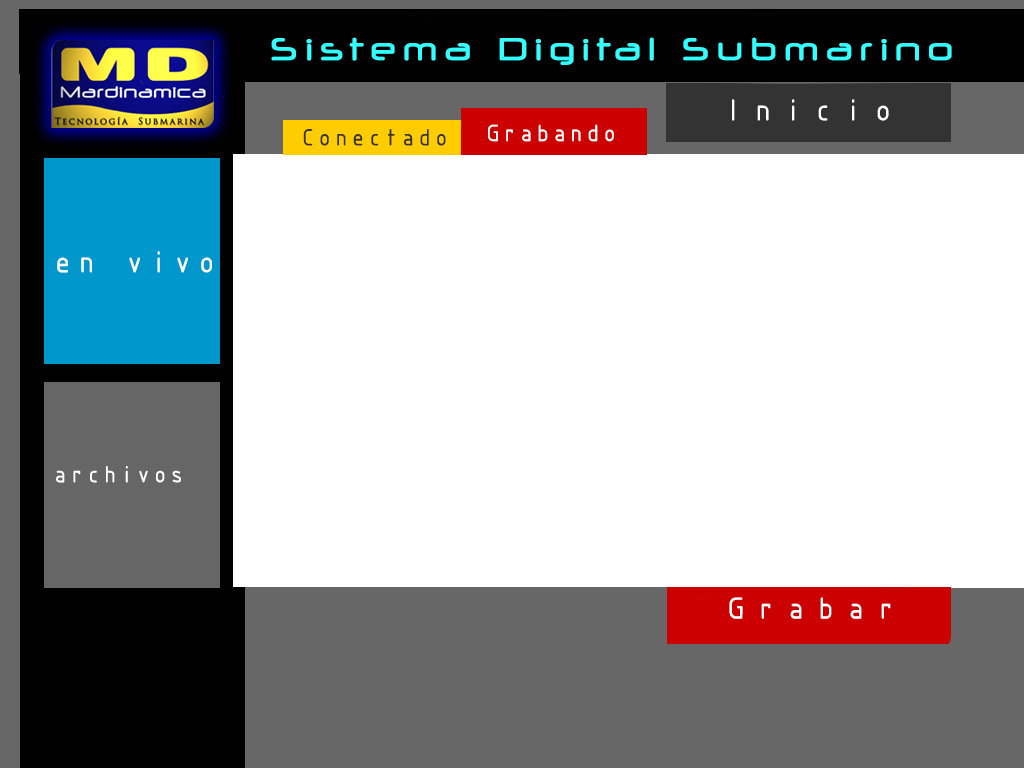
<style>
.page{position:relative;width:1024px;height:768px;background:#ffffff}
.page>*{position:absolute;margin:0}
.t1{font:33.3px "NeuropolXRg-Regular";letter-spacing:0.2em;color:#33ffff;font-weight:bold}
.t2{font:30px "SWIsot3";letter-spacing:0.2em;color:#ffffff;font-weight:bold}
.t3{font:23.3px "SWIsot3";letter-spacing:-0.1em;color:#ffffff;font-weight:bold}
.t4{font:23.3px "SWIsot3";letter-spacing:-0.1em;color:#333333;font-weight:bold}
.t5{font:23.3px/30px "SWIsot3";letter-spacing:-0.1em;color:#ffffff;font-weight:bold}
.t6{font:30px/30px "SWIsot3";color:#ffffff;font-weight:bold}
</style>
<div class="page">
<p class="t1" style="left:271px;top:37px;width:681px;height:28px">Sistema Digital Submarino</p>
<p class="t2" style="left:732px;top:99px;width:157px;height:22px">Inicio</p>
<p class="t3" style="left:488px;top:124px;width:126px;height:18px">Grabando</p>
<p class="t4" style="left:303px;top:129px;width:143px;height:17px">Conectado</p>
<p class="t5" style="left:56px;top:251px;width:156px;height:232px"><span class="t6">en vivo<br><br><br><br><br><br><br></span>archivos</p>
<p class="t2" style="left:729px;top:597px;width:162px;height:22px">Grabar</p>
</div>
